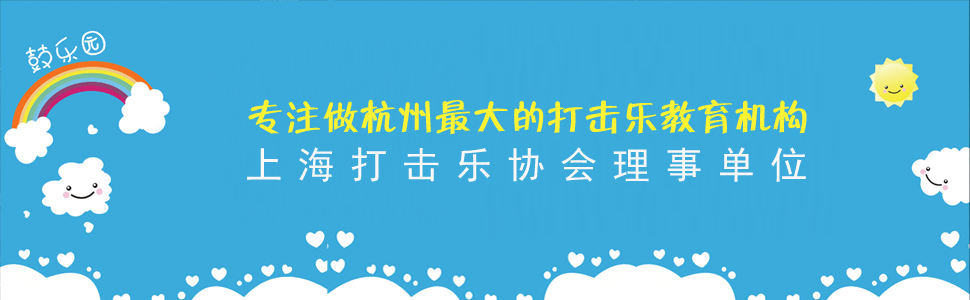
<style>
.page{position:relative;width:970px;height:300px;background:#3babdb}
.page>*{position:absolute;margin:0}
.t1{font:37.5px "FZZBHJW--GB1-0";color:#fef234}
.t2{font:37.5px "SimHei";letter-spacing:0.4em;color:#fbf7f7}
</style>
<div class="page">
<p class="t1" style="left:248px;top:99px;width:559px;height:36px">专注做杭州最大的打击乐教育机构</p>
<p class="t2" style="left:247px;top:147px;width:559px;height:35px">上海打击乐协会理事单位</p>
</div>
